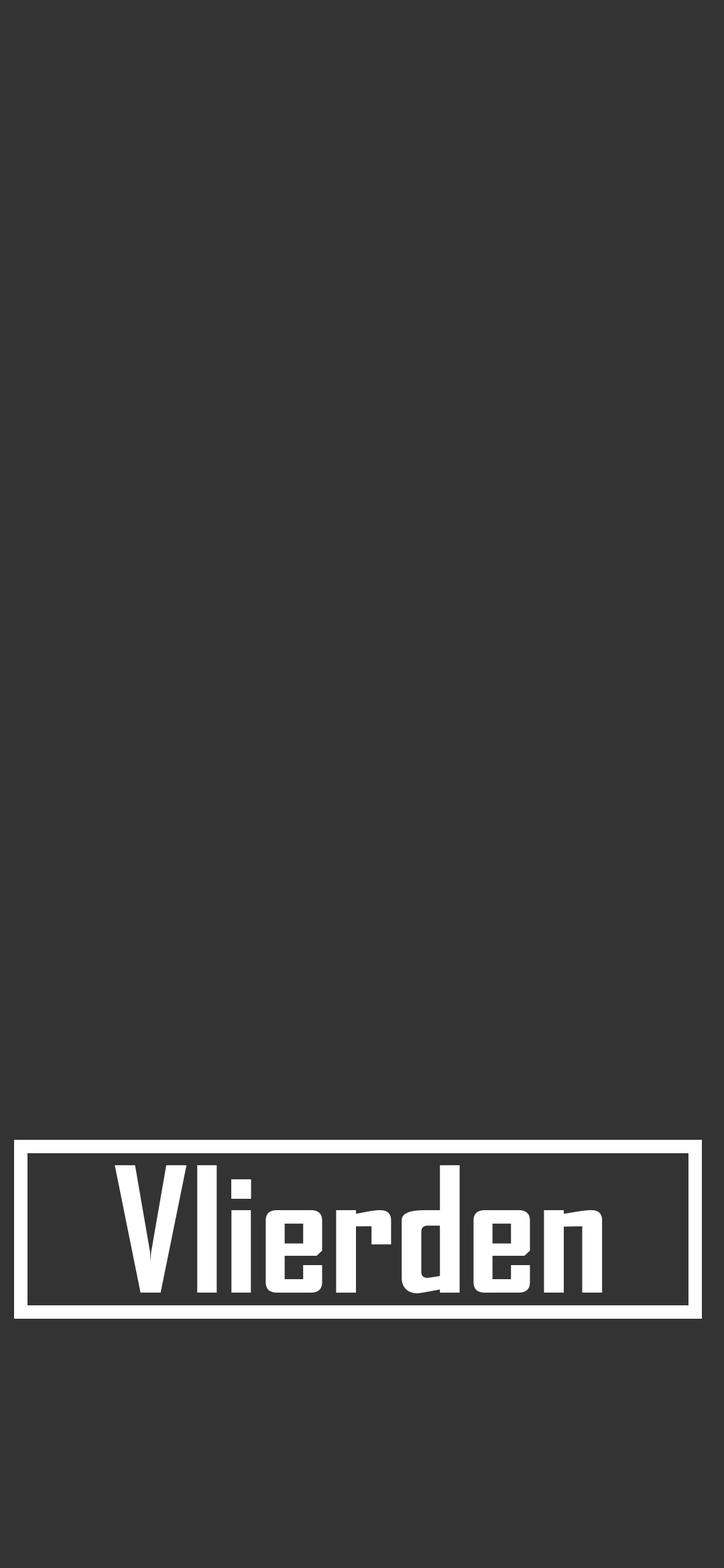
<style>
.page{position:relative;width:724px;height:1568px;background:#333333}
.page>*{position:absolute;margin:0}
.t1{font:166.6px "AgencyFB-Bold";color:#ffffff;scale:1.06 1}
</style>
<div class="page">
<p class="t1" style="left:115px;top:1165px;width:487px;height:128px">Vlierden</p>
</div>
